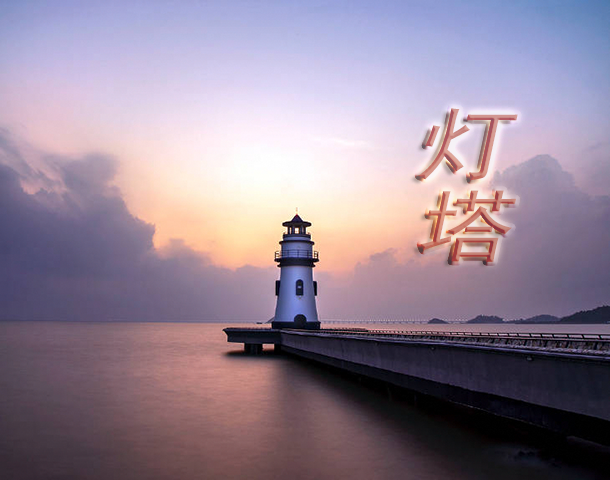
<style>
.page{position:relative;width:610px;height:480px}
.page>*{position:absolute;margin:0}
.t1{font:94.5px "SimHei";letter-spacing:0.05em;font-style:italic;scale:0.83 1}
</style>
<div class="page">
<p class="t1" style="left:418px;top:108px;width:100px;height:154px">灯塔</p>
</div>
